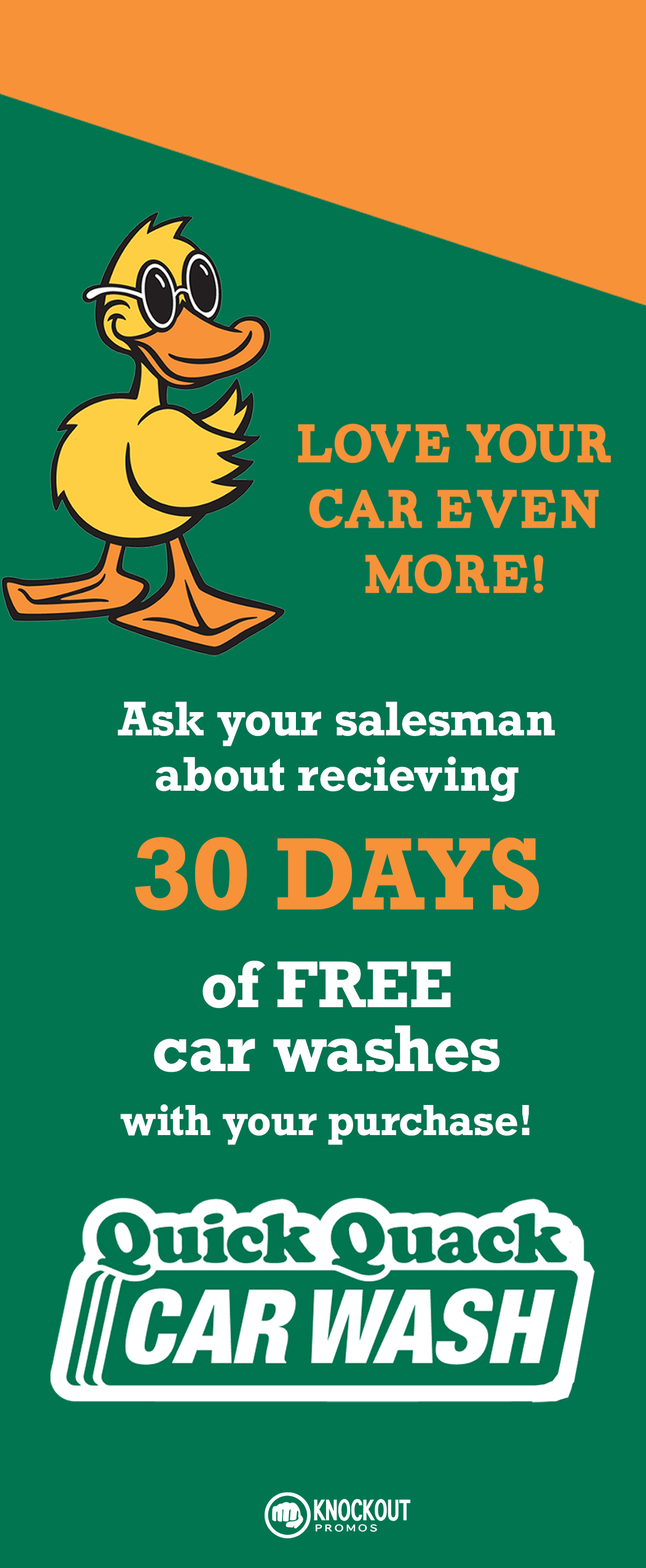
<style>
.page{position:relative;width:646px;height:1568px;background:#007550}
.page>*{position:absolute;margin:0}
.t1{font:54.6px "Carton";color:#f79239}
.t2{font:45.7px "Rockwell-Bold";color:#ffffff}
.t3{font:96.8px "Rockwell-Bold";color:#f79239}
.t4{font:62px/64.1px "Rockwell-Bold";color:#ffffff}
.t5{font:41px/64.1px "Rockwell-Bold";color:#ffffff}
</style>
<div class="page">
<p class="t1" style="left:298px;top:424px;width:313px;height:169px;text-align:center">love your car even more!</p>
<p class="t2" style="left:117px;top:702px;width:438px;height:100px;text-align:center">Ask your salesman about recieving</p>
<p class="t3" style="left:135px;top:837px;width:404px;height:74px">30 DAYS</p>
<p class="t4" style="left:121px;top:960px;width:408px;height:185px;text-align:center">of FREE <br>car washes<br><span class="t5">with your purchase!</span></p>
</div>
